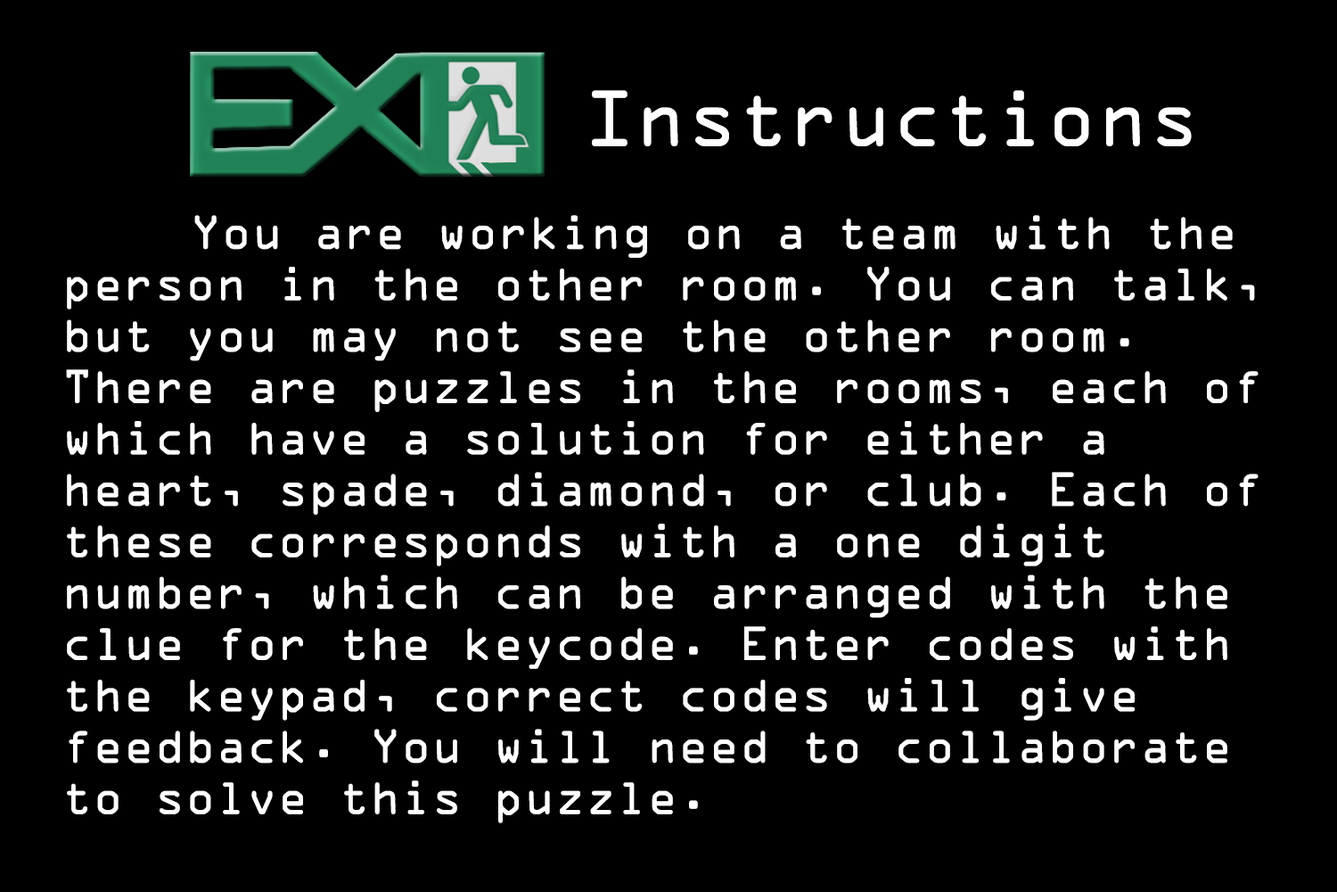
<style>
.page{position:relative;width:1337px;height:892px;background:#000000}
.page>*{position:absolute;margin:0}
.t1{font:42.8px "OCRAStd";color:#ffffff}
.t2{font:71.3px "OCRAStd";color:#ffffff}
</style>
<div class="page">
<p class="t1" style="left:66px;top:90px;width:1193px;height:733px;text-align:center"><span class="t2">              Instructions<br></span><br>    You are working on a team with the person in the other room. You can talk, but you may not see the other room. There are puzzles in the rooms, each of which have a solution for either a heart, spade, diamond, or club. Each of these corresponds with a one digit number, which can be arranged with the clue for the keycode. Enter codes with the keypad, correct codes will give feedback. You will need to collaborate to solve this puzzle.</p>
</div>
